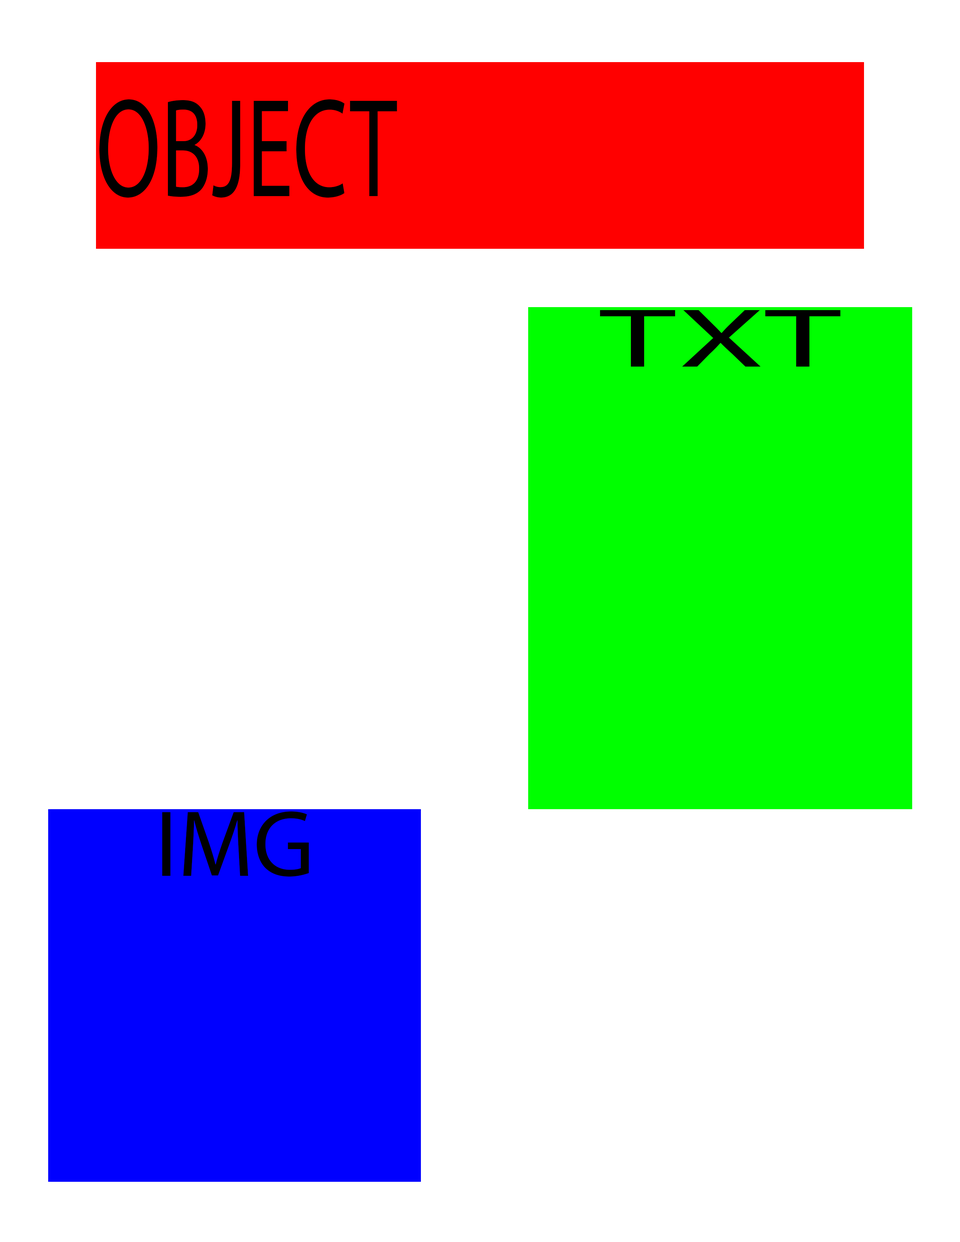
<style>
.page{position:relative;width:960px;height:1242px;background:#ffffff}
.page>*{position:absolute;margin:0}
.t1{font:141.4px "MyriadPro-Regular";color:#000000;scale:0.67 1}
.t2{font:84px "MyriadPro-Regular";color:#000000;scale:1.79 1}
.t3{font:94.1px "MyriadPro-Regular";color:#000000}
</style>
<div class="page">
<p class="t1" style="left:99px;top:99px;width:298px;height:99px">OBJECT</p>
<p class="t2" style="left:600px;top:310px;width:241px;height:57px">TXT</p>
<p class="t3" style="left:162px;top:812px;width:147px;height:65px">IMG</p>
</div>
